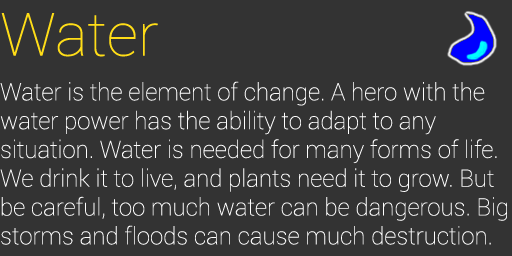
<style>
.page{position:relative;width:512px;height:256px;background:#333333}
.page>*{position:absolute;margin:0}
.t1{font:60px "Roboto-Thin";color:#ffdd17;scale:1.03 1}
.t2{font:24px "Roboto-Thin";color:#ffffff}
</style>
<div class="page">
<p class="t1" style="left:1px;top:13px;width:157px;height:44px">Water</p>
<p class="t2" style="left:0px;top:81px;width:507px;height:164px">Water is the element of change. A hero with the water power has the ability to adapt to any <br>situation. Water is needed for many forms of life. We drink it to live, and plants need it to grow. But be careful, too much water can be dangerous. Big storms and floods can cause much destruction.</p>
</div>
